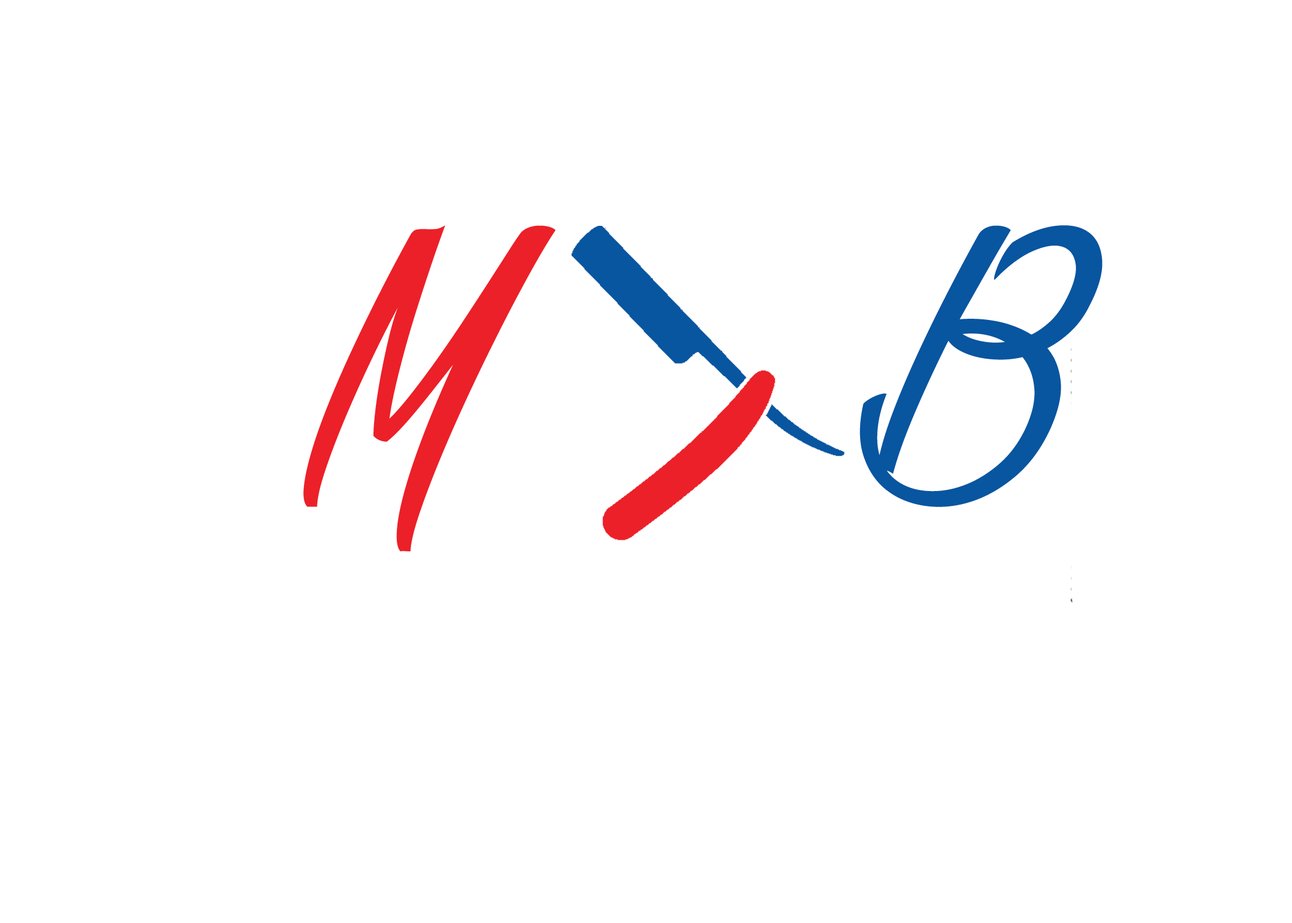
<style>
.page{position:relative;width:1292px;height:923px;background:#ffffff}
.page>*{position:absolute;margin:0}
.t1{font:384.5px "Gillie&Hilda";color:#ec2028}
.t2{font:384.5px "Gillie&Hilda";color:#0855a0}
</style>
<div class="page">
<p class="t1" style="left:303px;top:225px;width:800px;height:326px">M    <span class="t2">B</span></p>
</div>
